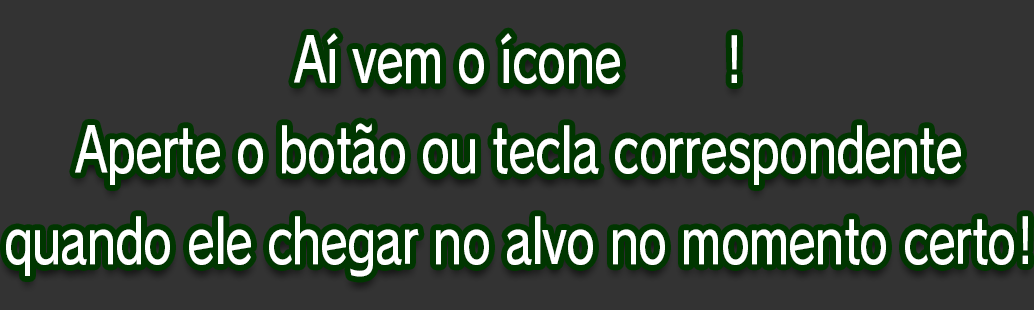
<style>
.page{position:relative;width:1034px;height:310px;background:#333333}
.page>*{position:absolute;margin:0}
.t1{font:61.3px/90.7px "RodinPro-DB";letter-spacing:-0.022em;color:#ffffff;scale:0.75 1}
</style>
<div class="page">
<p class="t1" style="left:6px;top:33px;width:1022px;height:244px;text-align:center">Aí vem o ícone       !<br>Aperte o botão ou tecla correspondente<br>quando ele chegar no alvo no momento certo!</p>
</div>
